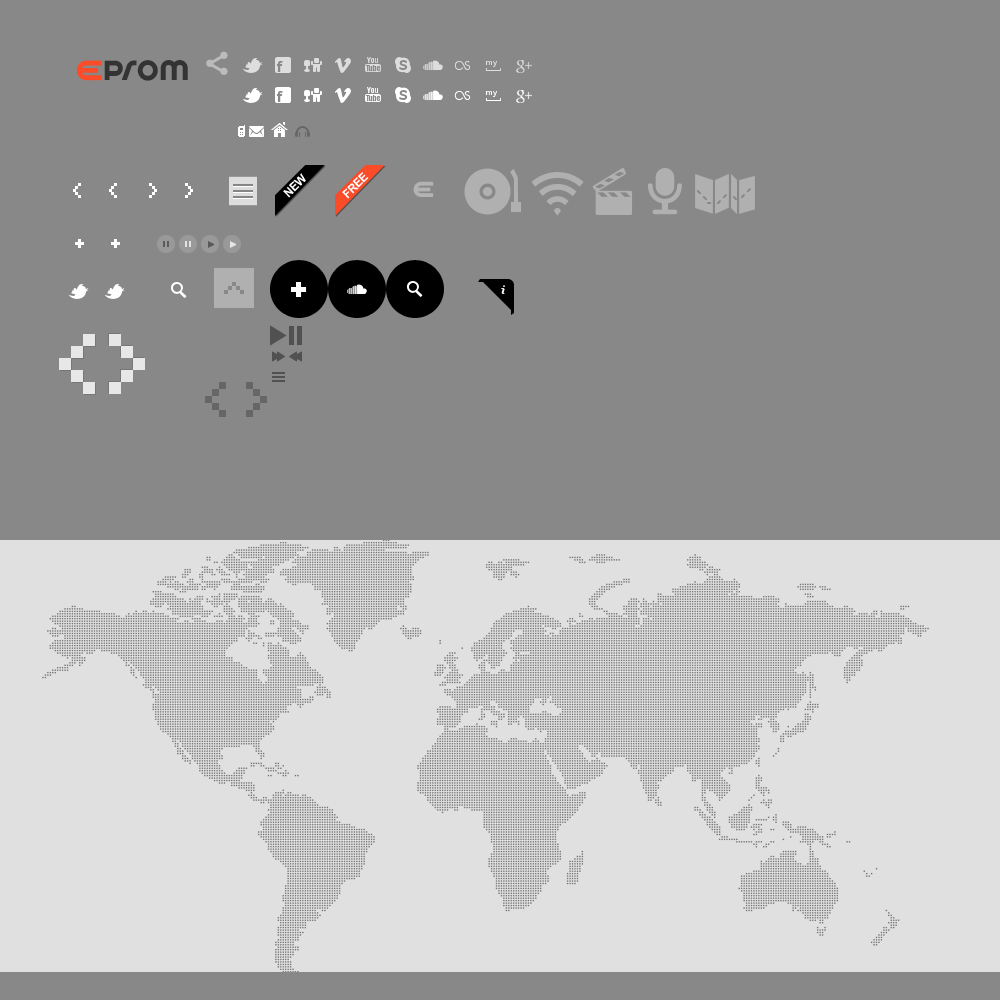
<style>
.page{position:relative;width:1000px;height:1000px;background:#888888}
.page>*{position:absolute;margin:0}
.t1{font:30.8px "SpinCycleOT";letter-spacing:0.025em;color:#333333}
.t2{font:12px "Arial-BoldMT";letter-spacing:-0.025em;color:#ffffff;scale:0.95 1}
</style>
<div class="page">
<p class="t1" style="left:104px;top:60px;width:84px;height:21px">prom</p>
<p class="t2" style="left:283px;top:173px;width:23px;height:25px;rotate:-44deg">NEW</p>
<p class="t2" style="left:342px;top:172px;width:27px;height:27px;rotate:-44deg">FREE</p>
</div>
